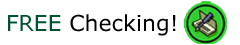
<style>
.page{position:relative;width:240px;height:45px;background:#ffffff}
.page>*{position:absolute;margin:0}
.t1{font:22px "Verdana";color:#000000}
.t2{font:22px "Verdana";color:#005231}
</style>
<div class="page">
<p class="t1" style="left:6px;top:14px;width:172px;height:27px"><span class="t2">FREE </span>Checking!</p>
</div>
